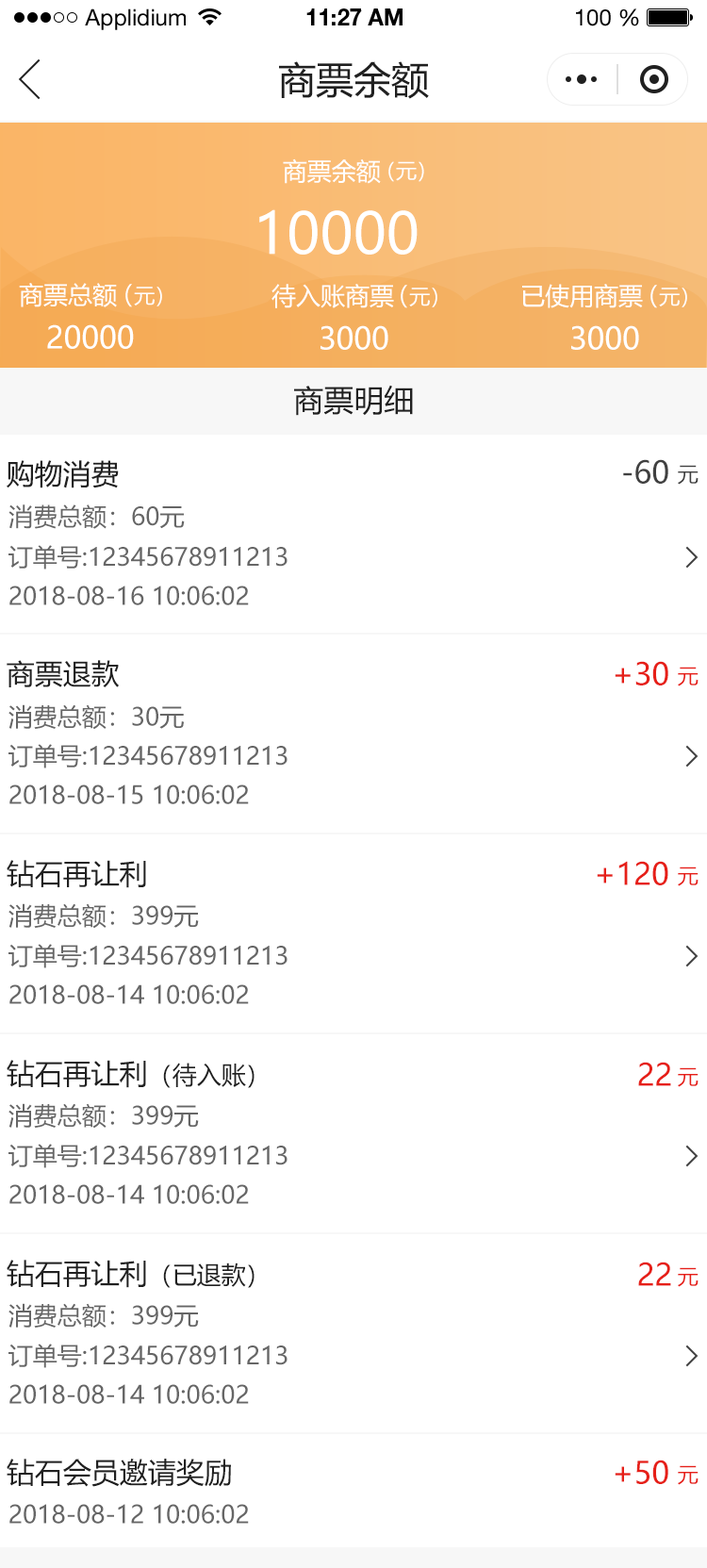
<style>
.page{position:relative;width:707px;height:1568px;background:#ffffff}
.page>*{position:absolute;margin:0}
.t1{font:22.6px "HelveticaNeueLTStd-Roman";color:#000000}
.t2{font:22.6px "HelveticaNeueLTStd-Bd";color:#000000}
.t3{font:37.7px "MicrosoftYaHei";color:#202020;text-transform:uppercase}
.t4{font:24.5px "MicrosoftYaHei";color:#ffffff;text-transform:uppercase}
.t5{font:20.7px "MicrosoftYaHei";color:#ffffff;text-transform:uppercase}
.t6{font:56.6px "MicrosoftYaHei";color:#ffffff;text-transform:uppercase}
.t7{font:30.2px "MicrosoftYaHei";color:#ffffff;text-transform:uppercase}
.t8{font:30.2px "MicrosoftYaHei";color:#202020;text-transform:uppercase}
.t9{font:28.3px "MicrosoftYaHei";color:#202020;text-transform:uppercase}
.t10{font:30.2px "MicrosoftYaHei";color:#404040;text-transform:uppercase}
.t11{font:20.7px "MicrosoftYaHei";color:#404040;text-transform:uppercase}
.t12{font:24.5px "MicrosoftYaHei";color:#666666;text-transform:uppercase}
.t13{font:30.2px "MicrosoftYaHei";color:#e61f18;text-transform:uppercase}
.t14{font:20.7px "MicrosoftYaHei";color:#e61f18;text-transform:uppercase}
.t15{font:24.5px "MicrosoftYaHei";color:#202020;text-transform:uppercase}
</style>
<div class="page">
<p class="t1" style="left:85px;top:8px;width:101px;height:22px">Applidium</p>
<p class="t2" style="left:306px;top:8px;width:97px;height:17px">11:27 AM</p>
<p class="t1" style="left:576px;top:8px;width:63px;height:18px">100 %</p>
<p class="t3" style="left:279px;top:61px;width:150px;height:38px">商票余额</p>
<p class="t4" style="left:283px;top:158px;width:98px;height:26px">商票余额</p>
<p class="t5" style="left:388px;top:161px;width:36px;height:21px">（元）</p>
<p class="t6" style="left:259px;top:209px;width:159px;height:46px">10000</p>
<p class="t4" style="left:19px;top:283px;width:98px;height:24px">商票总额</p>
<p class="t5" style="left:125px;top:284px;width:37px;height:23px"><span class="t4">（</span>元）</p>
<p class="t4" style="left:272px;top:284px;width:122px;height:24px">待入账商票</p>
<p class="t5" style="left:401px;top:285px;width:36px;height:23px"><span class="t4">（</span>元）</p>
<p class="t4" style="left:522px;top:284px;width:121px;height:24px">已使用商票</p>
<p class="t5" style="left:651px;top:285px;width:36px;height:23px"><span class="t4">（</span>元）</p>
<p class="t7" style="left:47px;top:324px;width:87px;height:25px">20000</p>
<p class="t7" style="left:321px;top:325px;width:67px;height:25px">3000</p>
<p class="t7" style="left:571px;top:325px;width:68px;height:25px">3000</p>
<p class="t8" style="left:294px;top:385px;width:119px;height:31px">商票明细</p>
<p class="t9" style="left:7px;top:460px;width:112px;height:28px">购物消费</p>
<p class="t10" style="left:623px;top:459px;width:45px;height:25px">-60</p>
<p class="t11" style="left:678px;top:465px;width:21px;height:20px">元</p>
<p class="t12" style="left:8px;top:504px;width:177px;height:25px">消费总额：60元</p>
<p class="t12" style="left:8px;top:545px;width:280px;height:24px">订单号:12345678911213</p>
<p class="t12" style="left:9px;top:586px;width:240px;height:19px">2018-08-16 10:06:02</p>
<p class="t9" style="left:7px;top:660px;width:113px;height:27px">商票退款</p>
<p class="t13" style="left:615px;top:661px;width:53px;height:24px">+30</p>
<p class="t14" style="left:678px;top:667px;width:21px;height:19px">元</p>
<p class="t12" style="left:8px;top:704px;width:176px;height:26px">消费总额：30元</p>
<p class="t12" style="left:8px;top:744px;width:280px;height:24px">订单号:12345678911213</p>
<p class="t12" style="left:9px;top:784px;width:240px;height:20px">2018-08-15 10:06:02</p>
<p class="t9" style="left:7px;top:860px;width:139px;height:28px">钻石再让利</p>
<p class="t13" style="left:597px;top:861px;width:71px;height:24px">+120</p>
<p class="t14" style="left:678px;top:867px;width:21px;height:19px">元</p>
<p class="t12" style="left:8px;top:903px;width:191px;height:26px">消费总额：399元</p>
<p class="t12" style="left:8px;top:944px;width:280px;height:24px">订单号:12345678911213</p>
<p class="t12" style="left:9px;top:984px;width:240px;height:20px">2018-08-14 10:06:02</p>
<p class="t9" style="left:7px;top:1060px;width:248px;height:28px">钻石再让利<span class="t15">（待入账）</span></p>
<p class="t13" style="left:638px;top:1062px;width:33px;height:24px">22</p>
<p class="t14" style="left:678px;top:1067px;width:21px;height:20px">元</p>
<p class="t12" style="left:8px;top:1103px;width:191px;height:26px">消费总额：399元</p>
<p class="t12" style="left:8px;top:1144px;width:280px;height:24px">订单号:12345678911213</p>
<p class="t12" style="left:9px;top:1184px;width:240px;height:20px">2018-08-14 10:06:02</p>
<p class="t9" style="left:7px;top:1260px;width:248px;height:28px">钻石再让利<span class="t15">（已退款）</span></p>
<p class="t13" style="left:638px;top:1262px;width:33px;height:24px">22</p>
<p class="t14" style="left:678px;top:1267px;width:21px;height:20px">元</p>
<p class="t12" style="left:8px;top:1303px;width:191px;height:26px">消费总额：399元</p>
<p class="t12" style="left:8px;top:1344px;width:280px;height:24px">订单号:12345678911213</p>
<p class="t12" style="left:9px;top:1384px;width:240px;height:20px">2018-08-14 10:06:02</p>
<p class="t9" style="left:7px;top:1459px;width:224px;height:28px">钻石会员邀请奖励</p>
<p class="t13" style="left:615px;top:1460px;width:53px;height:24px">+50</p>
<p class="t14" style="left:678px;top:1465px;width:21px;height:20px">元</p>
<p class="t12" style="left:9px;top:1504px;width:240px;height:20px">2018-08-12 10:06:02</p>
</div>
